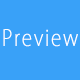
<style>
.page{position:relative;width:80px;height:80px;background:#39a1f8}
.page>*{position:absolute;margin:0}
.t1{font:22px "KozGoPro-ExtraLight";letter-spacing:0.08em;color:#ffffff;font-weight:bold;scale:0.85 1}
</style>
<div class="page">
<p class="t1" style="left:3px;top:29px;width:75px;height:18px">Preview</p>
</div>
